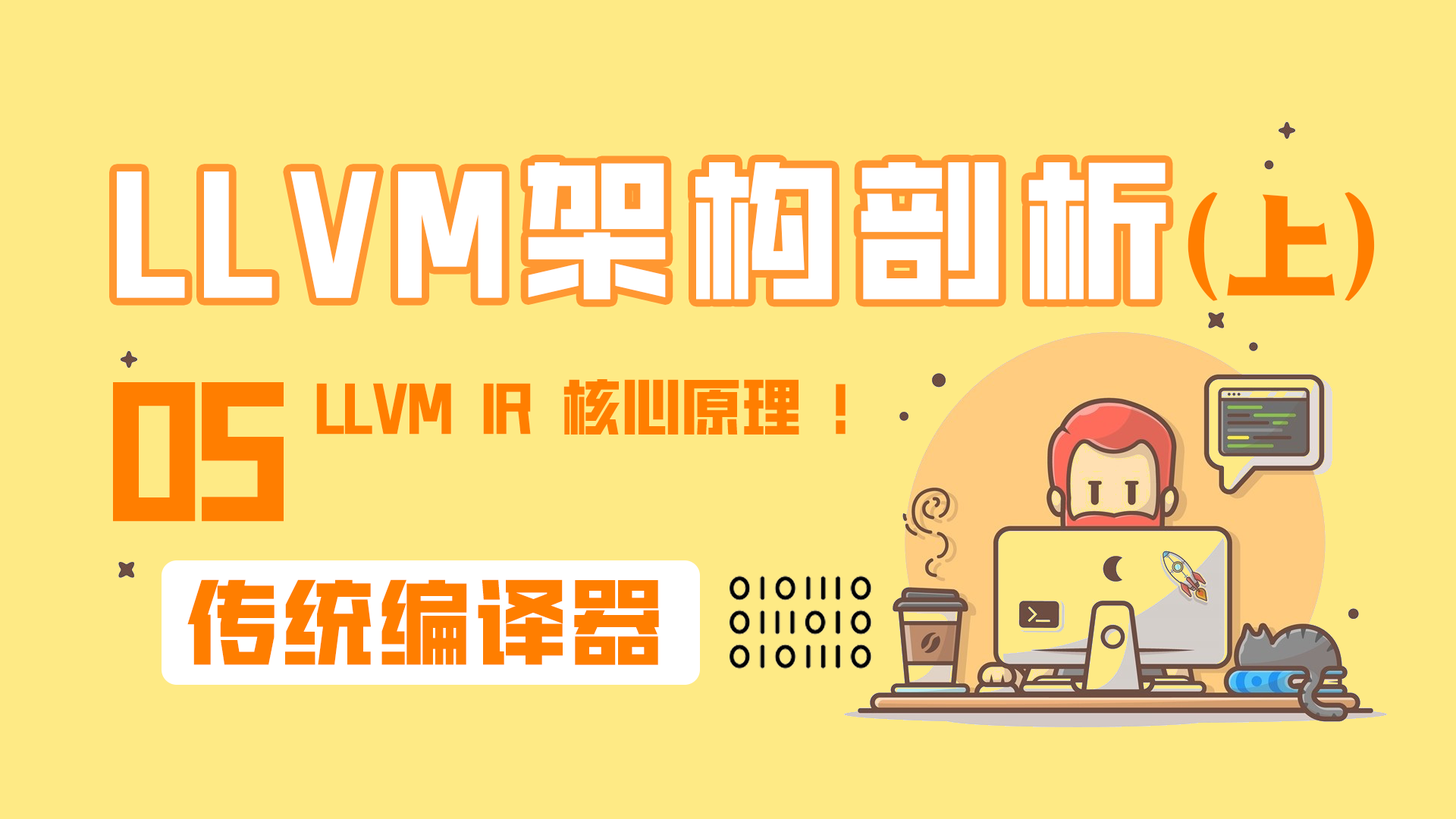
<style>
.page{position:relative;width:1456px;height:819px;background:#feea85}
.page>*{position:absolute;margin:0}
.t1{font:151.7px "HGGTZHVF-Medium";letter-spacing:0.1em;color:#ffffff}
.t2{font:121.3px "095-SSKunLunTi";color:#ff7e00}
.t3{font:166.8px "HGGTZHVF-Medium";letter-spacing:-0.01em;color:#ff7e00}
.t4{font:60.7px "HGGTZHVF-Medium";letter-spacing:-0.01em;color:#ff7e00;font-weight:bold}
.t5{font:93.8px "HGGTZHVF-Medium";letter-spacing:0.025em;color:#ff7e00;font-weight:bold}
</style>
<div class="page">
<p class="t1" style="left:117px;top:162px;width:1049px;height:138px">LLVM架构剖析</p>
<p class="t2" style="left:1188px;top:192px;width:187px;height:109px">(上)</p>
<p class="t3" style="left:113px;top:382px;width:171px;height:140px">05</p>
<p class="t4" style="left:316px;top:379px;width:530px;height:56px">LLVM IR 核心原理 ！</p>
<p class="t5" style="left:187px;top:579px;width:472px;height:86px">传统编译器</p>
</div>
